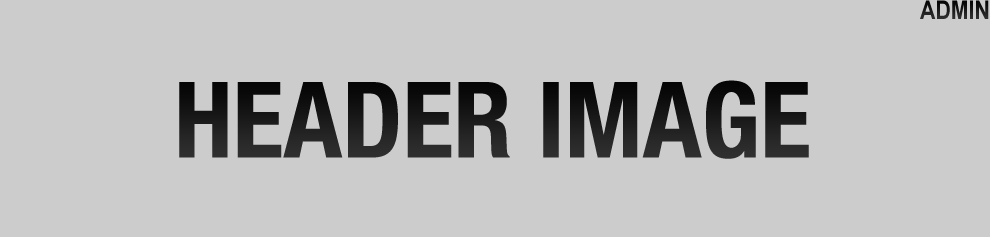
<style>
.page{position:relative;width:990px;height:237px;background:#cccccc}
.page>*{position:absolute;margin:0}
.t1{font:26px "ArialNarrow-Bold";color:#1b1a1a}
.t2{font:105.5px "HelveticaNeue-CondensedBold";color:#1b1a1a}
</style>
<div class="page">
<p class="t1" style="left:920px;top:0px;width:69px;height:19px">ADMIN</p>
<p class="t2" style="left:179px;top:80px;width:630px;height:79px">HEADER IMAGE</p>
</div>
